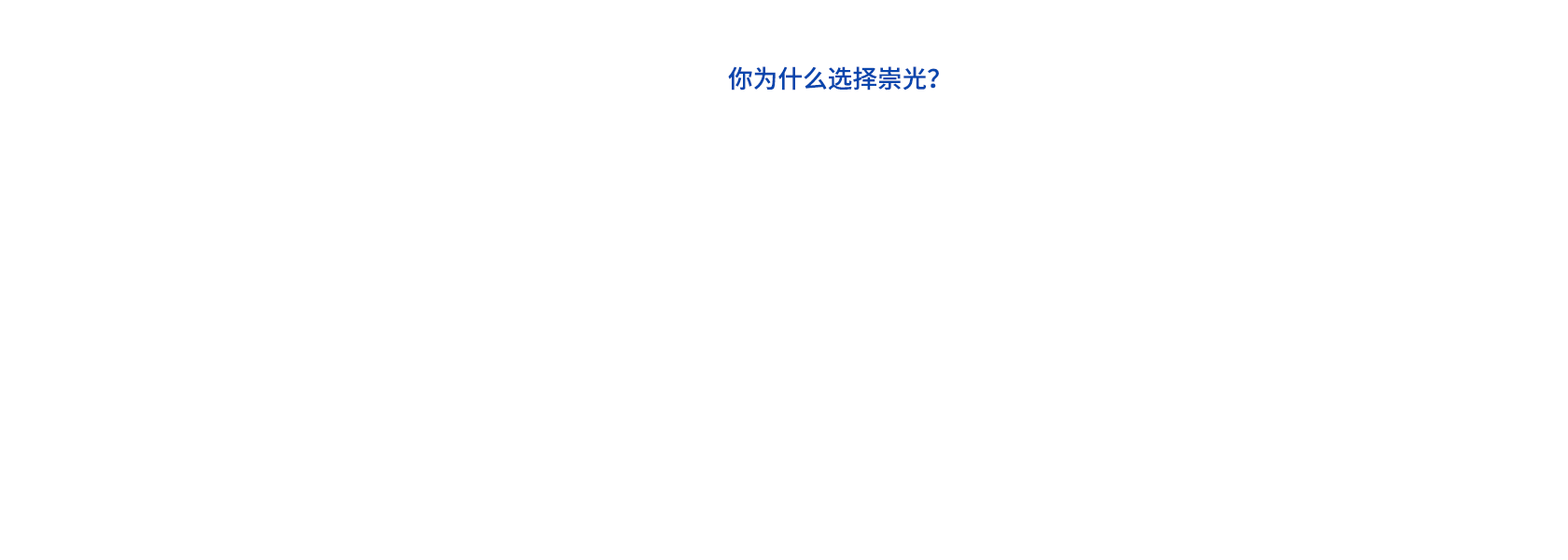
<style>
.page{position:relative;width:1568px;height:560px;background:#ffffff}
.page>*{position:absolute;margin:0}
.t1{font:24.9px "SourceHanSansCN-Medium";color:#0846ad}
</style>
<div class="page">
<p class="t1" style="left:728px;top:66px;width:211px;height:25px">你为什么选择崇光？</p>
</div>
